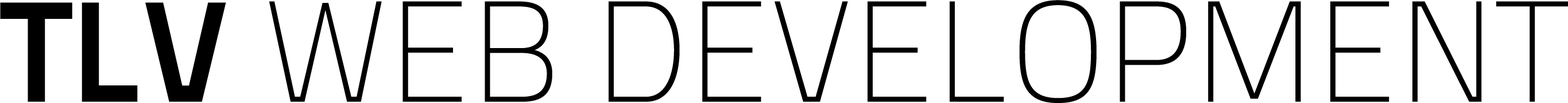
<style>
.page{position:relative;width:1568px;height:103px;background:#ffffff}
.page>*{position:absolute;margin:0}
.t1{font:143.5px "TitilliumText25L-1wt";color:#000000}
.t2{font:143.5px "TitilliumText25L-800wt";color:#000000}
</style>
<div class="page">
<p class="t1" style="left:0px;top:0px;width:1568px;height:103px"><span class="t2">TLV </span>WEB DEVELOPMENT</p>
</div>
